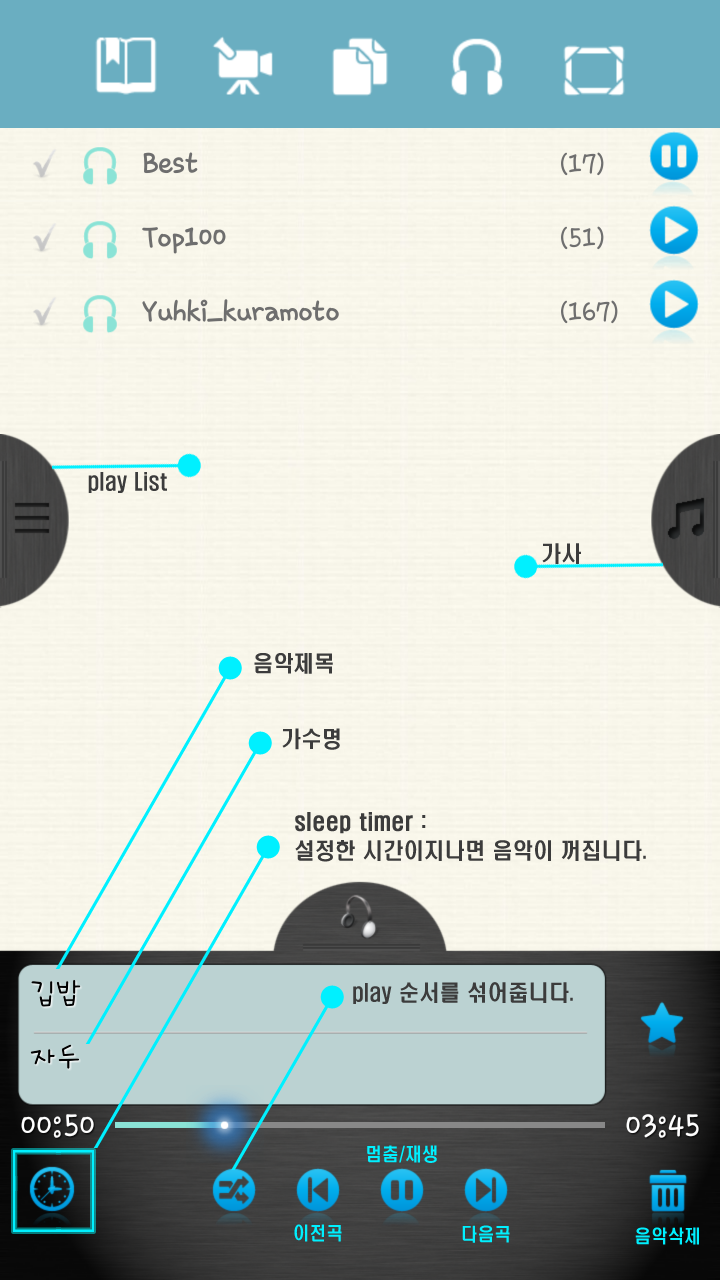
<style>
.page{position:relative;width:720px;height:1280px}
.page>*{position:absolute;margin:0}
.t1{font:22px "H2hdrM";letter-spacing:0.02em;color:#3c3c3c;scale:0.91 1}
.t2{font:22px/29px "H2hdrM";letter-spacing:0.02em;color:#3c3c3c;scale:0.91 1}
.t3{font:22px/29px "H2hdrM";letter-spacing:0.02em;color:#3c3c3c;font-weight:bold;scale:0.91 1}
.t4{font:18px "H2hdrM";letter-spacing:0.02em;color:#00f0ff;scale:0.91 1}
</style>
<div class="page">
<p class="t1" style="left:88px;top:472px;width:79px;height:21px">play List</p>
<p class="t1" style="left:542px;top:543px;width:39px;height:21px">가사</p>
<p class="t1" style="left:254px;top:653px;width:79px;height:21px">음악제목</p>
<p class="t1" style="left:282px;top:728px;width:58px;height:22px">가수명</p>
<p class="t2" style="left:295px;top:812px;width:351px;height:50px"><span class="t3">sleep timer</span> : <br>설정한 시간이지나면 음악이 꺼집니다.</p>
<p class="t1" style="left:353px;top:982px;width:220px;height:22px">play 순서를 섞어줍니다.</p>
<p class="t4" style="left:367px;top:1145px;width:70px;height:18px">멈춤/재생</p>
<p class="t4" style="left:294px;top:1224px;width:48px;height:18px">이전곡</p>
<p class="t4" style="left:462px;top:1225px;width:48px;height:18px">다음곡</p>
<p class="t4" style="left:635px;top:1227px;width:64px;height:18px">음악삭제</p>
</div>
